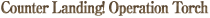
<style>
.page{position:relative;width:210px;height:18px;background:#ffffff}
.page>*{position:absolute;margin:0}
.t1{font:16px "RyuminPro-ExBold";letter-spacing:-0.08em;color:#6b573e;font-weight:bold;scale:0.87 1}
</style>
<div class="page">
<p class="t1" style="left:1px;top:1px;width:208px;height:15px">Counter Landing! Operation Torch</p>
</div>
